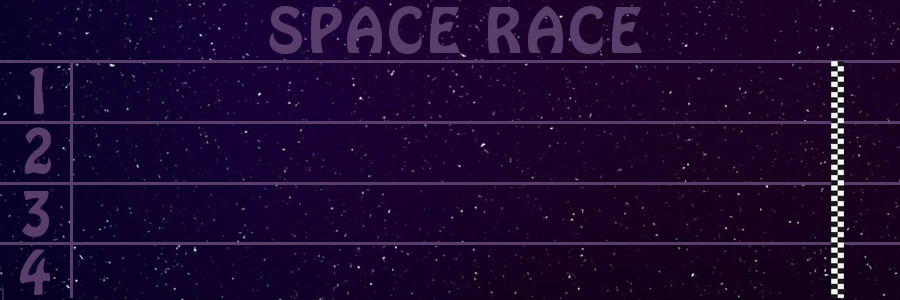
<style>
.page{position:relative;width:900px;height:300px}
.page>*{position:absolute;margin:0}
.t1{font:55px "HoboStd";letter-spacing:0.08em;color:#593e6c;text-transform:uppercase}
</style>
<div class="page">
<p class="t1" style="left:269px;top:6px;width:373px;height:48px">SPACE RACE</p>
<p class="t1" style="left:30px;top:67px;width:14px;height:47px">1</p>
<p class="t1" style="left:24px;top:127px;width:27px;height:47px">2</p>
<p class="t1" style="left:22px;top:191px;width:27px;height:46px">3</p>
</div>
